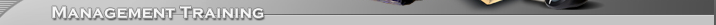
<style>
.page{position:relative;width:716px;height:25px;background:#c4c4c4}
.page>*{position:absolute;margin:0}
.t1{font:16.7px "CopperplateGothic-Bold";letter-spacing:0.025em;color:#f6f6f6}
</style>
<div class="page">
<p class="t1" style="left:52px;top:6px;width:212px;height:13px">Management Training</p>
</div>
